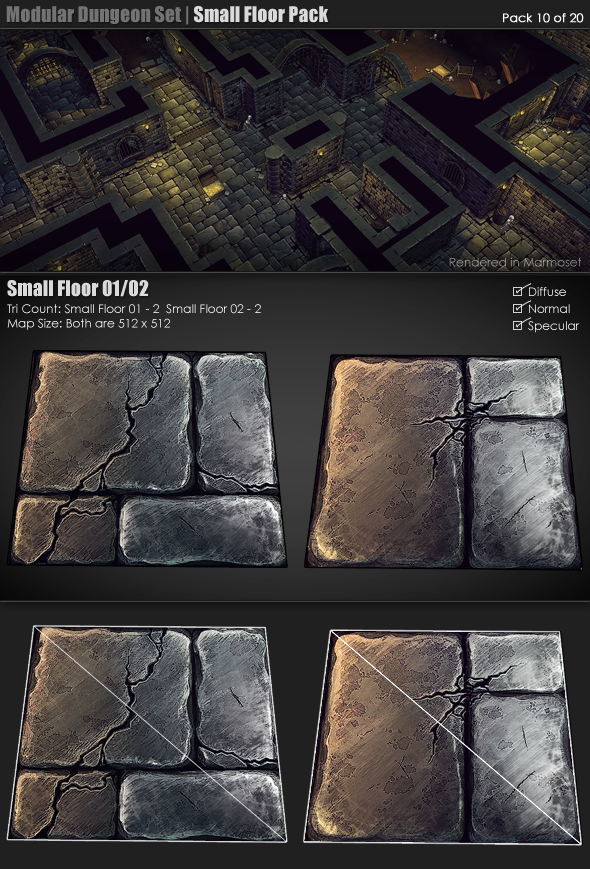
<style>
.page{position:relative;width:590px;height:869px}
.page>*{position:absolute;margin:0}
.t1{font:20px "Impact";color:#737373}
.t2{font:20px "Impact";color:#dadada}
.t3{font:12px "CenturyGothic";color:#ffffff;font-weight:bold}
.t4{font:12px "CenturyGothic";color:#a0a09c}
.t5{font:12px "CenturyGothic";color:#ffffff}
</style>
<div class="page">
<p class="t1" style="left:6px;top:6px;width:322px;height:19px">Modular Dungeon Set |<span class="t2"> Small Floor Pack</span></p>
<p class="t3" style="left:503px;top:13px;width:81px;height:10px">Pack 10 of 20</p>
<p class="t4" style="left:449px;top:257px;width:132px;height:10px">Rendered in Marmoset</p>
<p class="t2" style="left:7px;top:280px;width:142px;height:17px">Small Floor 01/02</p>
<p class="t5" style="left:7px;top:304px;width:254px;height:26px">Tri Count: Small Floor 01 - 2  Small Floor 02 - 2 <br>Map Size: Both are 512 x 512</p>
</div>
